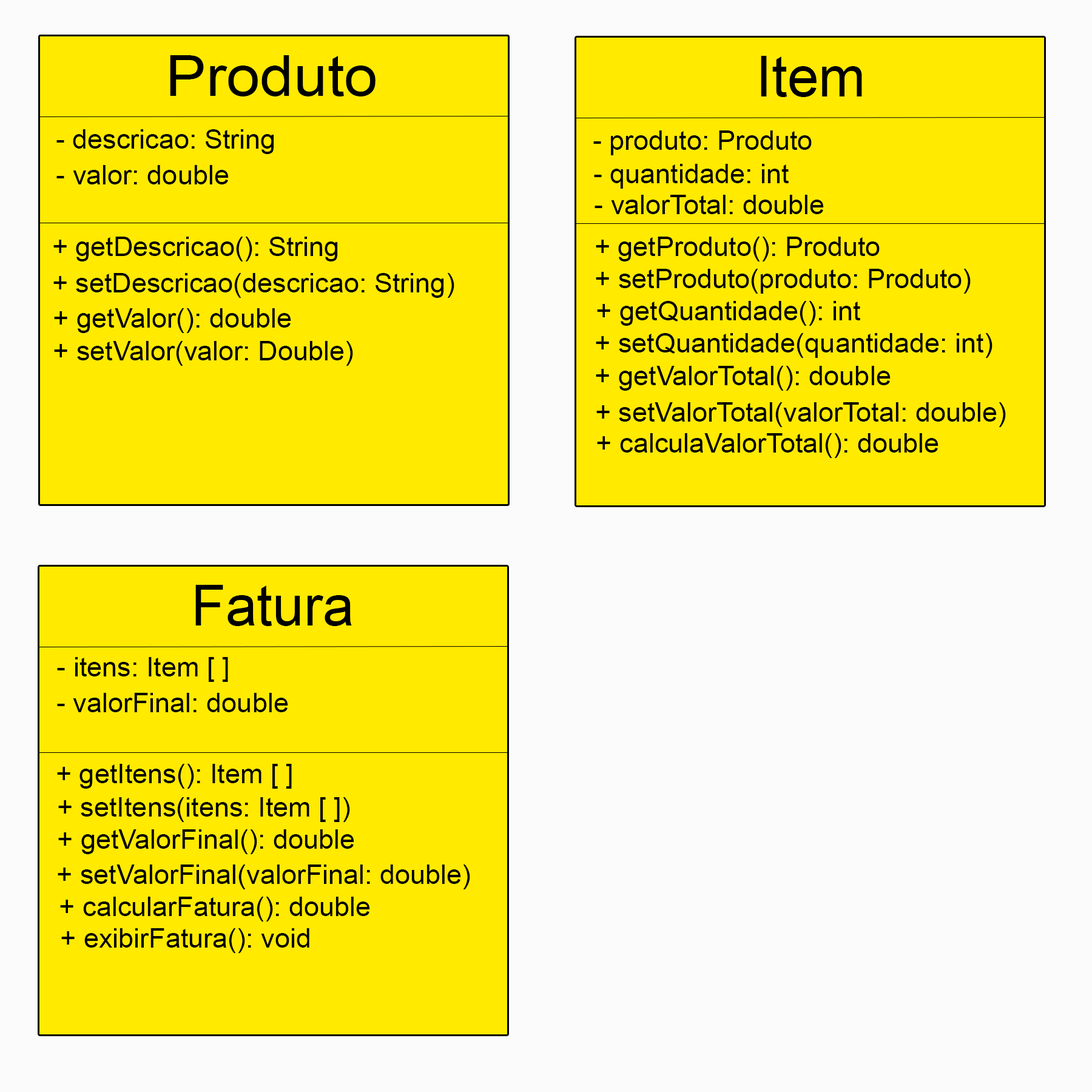
<style>
.page{position:relative;width:1092px;height:1092px;background:#ffea00}
.page>*{position:absolute;margin:0}
.t1{font:56.5px "ArialMT";color:#000000;scale:1.07 1}
.t2{font:56.5px "ArialMT";color:#000000}
.t3{font:27.3px "ArialMT";color:#000000}
</style>
<div class="page">
<p class="t1" style="left:170px;top:55px;width:206px;height:41px">Produto</p>
<p class="t2" style="left:761px;top:56px;width:101px;height:41px">Item</p>
<p class="t3" style="left:56px;top:129px;width:218px;height:25px">- descricao: String</p>
<p class="t3" style="left:593px;top:130px;width:219px;height:25px">- produto: Produto</p>
<p class="t3" style="left:56px;top:165px;width:173px;height:19px">- valor: double</p>
<p class="t3" style="left:594px;top:164px;width:195px;height:25px">- quantidade: int</p>
<p class="t3" style="left:595px;top:195px;width:229px;height:19px">- valorTotal: double</p>
<p class="t3" style="left:53px;top:237px;width:285px;height:24px">+ getDescricao(): String</p>
<p class="t3" style="left:596px;top:237px;width:284px;height:24px">+ getProduto(): Produto</p>
<p class="t3" style="left:596px;top:269px;width:375px;height:25px">+ setProduto(produto: Produto)</p>
<p class="t3" style="left:53px;top:273px;width:401px;height:25px">+ setDescricao(descricao: String)</p>
<p class="t3" style="left:597px;top:301px;width:264px;height:25px">+ getQuantidade(): int</p>
<p class="t3" style="left:54px;top:308px;width:237px;height:25px">+ getValor(): double</p>
<p class="t3" style="left:54px;top:341px;width:299px;height:25px">+ setValor(valor: Double)</p>
<p class="t3" style="left:596px;top:333px;width:396px;height:25px">+ setQuantidade(quantidade: int)</p>
<p class="t3" style="left:596px;top:366px;width:295px;height:25px">+ getValorTotal(): double</p>
<p class="t3" style="left:596px;top:402px;width:410px;height:25px">+ setValorTotal(valorTotal: double)</p>
<p class="t3" style="left:597px;top:433px;width:342px;height:25px">+ calculaValorTotal(): double</p>
<p class="t2" style="left:195px;top:585px;width:157px;height:41px">Fatura</p>
<p class="t3" style="left:57px;top:657px;width:171px;height:25px">- itens: Item [ ]</p>
<p class="t3" style="left:57px;top:693px;width:231px;height:19px">- valorFinal: double</p>
<p class="t3" style="left:57px;top:764px;width:235px;height:25px">+ getItens(): Item [ ]</p>
<p class="t3" style="left:58px;top:797px;width:292px;height:25px">+ setItens(itens: Item [ ])</p>
<p class="t3" style="left:58px;top:829px;width:296px;height:25px">+ getValorFinal(): double</p>
<p class="t3" style="left:58px;top:864px;width:412px;height:25px">+ setValorFinal(valorFinal: double)</p>
<p class="t3" style="left:60px;top:897px;width:310px;height:25px">+ calcularFatura(): double</p>
<p class="t3" style="left:61px;top:928px;width:248px;height:25px">+ exibirFatura(): void</p>
</div>
